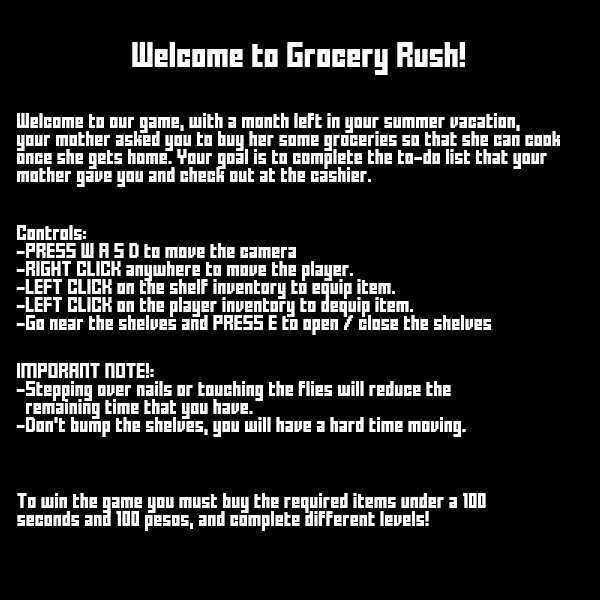
<style>
.page{position:relative;width:600px;height:600px;background:#000000}
.page>*{position:absolute;margin:0}
.t1{font:20px "FFFForward";color:#fefefe}
.t2{font:12px/18px "FFFForward";color:#fefefe}
</style>
<div class="page">
<p class="t1" style="left:132px;top:42px;width:333px;height:33px">Welcome to Grocery Rush!</p>
<p class="t2" style="left:17px;top:113px;width:543px;height:74px">Welcome to our game, with a month left in your summer vacation, <br>your mother asked you to buy her some groceries so that she can cook <br>once she gets home. Your goal is to complete the to-do list that your <br>mother gave you and check out at the cashier.</p>
<p class="t2" style="left:16px;top:225px;width:475px;height:110px">Controls:<br>-PRESS W A S D to move the camera<br>-RIGHT CLICK anywhere to move the player.<br>-LEFT CLICK on the shelf inventory to equip item.<br>-LEFT CLICK on the player inventory to dequip item.<br>-Go near the shelves and PRESS E to open / close the shelves</p>
<p class="t2" style="left:16px;top:363px;width:450px;height:74px">IMPORANT NOTE!:<br>-Stepping over nails or touching the flies will reduce the <br>  remaining time that you have.<br>-Don’t bump the shelves, you will have a hard time moving.</p>
<p class="t2" style="left:17px;top:493px;width:469px;height:38px">To win the game you must buy the required items under a 100 <br>seconds and 100 pesos, and complete different levels!</p>
</div>
